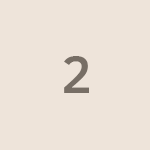
<style>
.page{position:relative;width:150px;height:150px;background:#eee4da}
.page>*{position:absolute;margin:0}
.t1{font:52.9px "ClearSans-Medium";color:#776e65}
</style>
<div class="page">
<p class="t1" style="left:64px;top:56px;width:25px;height:37px">2</p>
</div>
